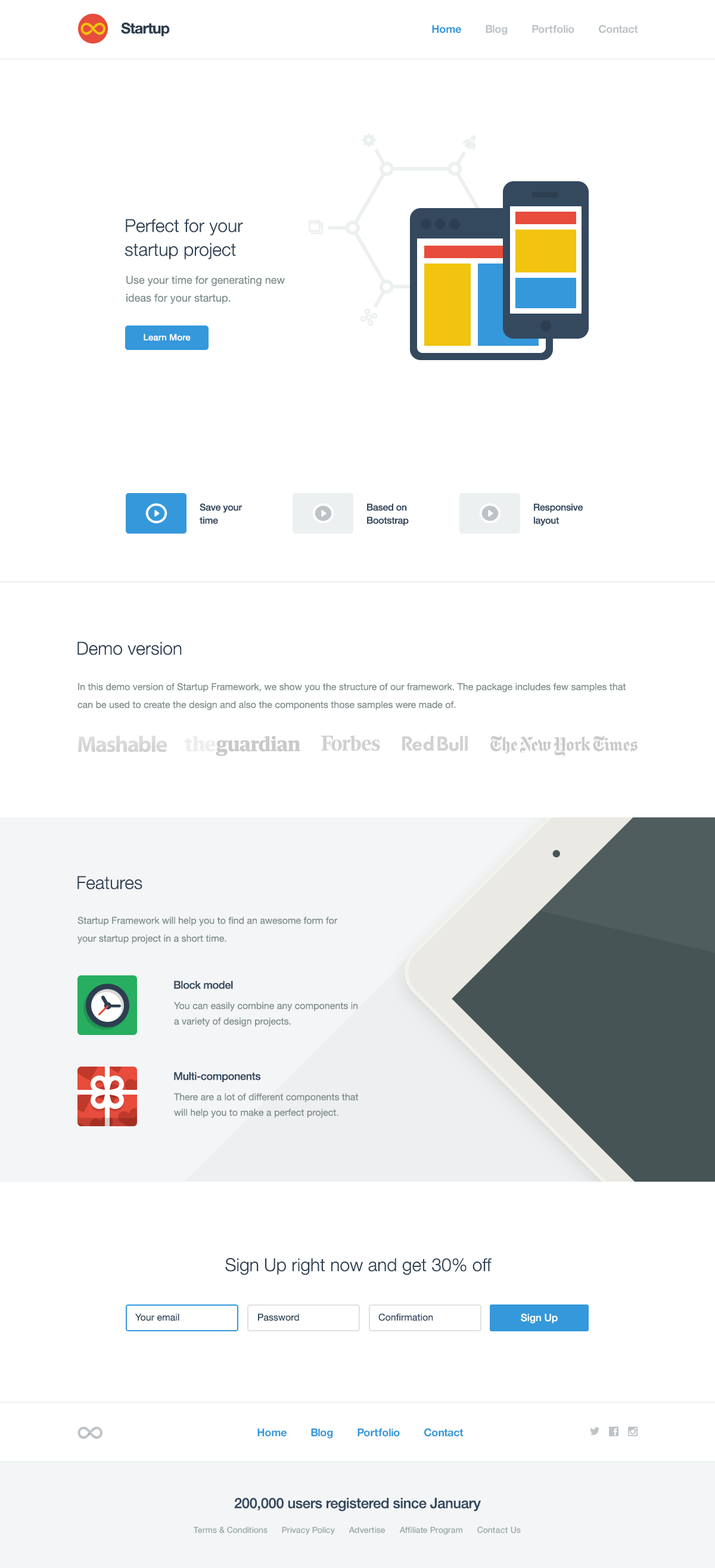
<style>
.page{position:relative;width:715px;height:1568px;background:#ffffff}
.page>*{position:absolute;margin:0}
.t1{font:14.9px "HelveticaNeue-Bold";letter-spacing:-0.04em;color:#2c3e50}
.t2{font:10.7px "HelveticaNeue-Bold";letter-spacing:-0.02em;color:#bdc3c7}
.t3{font:10.7px "HelveticaNeue-Bold";letter-spacing:-0.02em;color:#3498db}
.t4{font:17.9px/23.8px "HelveticaNeue-Light";color:#2c3e50}
.t5{font:10.7px/17.9px "HelveticaNeue";color:#7f8c8d}
.t6{font:8.9px "HelveticaNeue-Medium";color:#ffffff}
.t7{font:9.5px/13.1px "HelveticaNeue-Medium";letter-spacing:-0.02em;color:#34495e}
.t8{font:17.9px "HelveticaNeue-Light";color:#2c3e50}
.t9{font:9.5px/17.9px "HelveticaNeue";color:#7f8c8d}
.t10{font:10.7px "HelveticaNeue-Medium";letter-spacing:-0.02em;color:#34495e}
.t11{font:9.5px/15.5px "HelveticaNeue";color:#7f8c8d}
.t12{font:9.5px "HelveticaNeue";color:#34495e}
.t13{font:10.1px "HelveticaNeue-Medium";color:#ffffff}
.t14{font:14.3px "HelveticaNeue-Medium";letter-spacing:-0.02em;color:#34495e}
.t15{font:8.3px "HelveticaNeue-Medium";color:#95a5a6}
</style>
<div class="page">
<p class="t1" style="left:121px;top:22px;width:49px;height:14px">Startup</p>
<p class="t2" style="left:432px;top:24px;width:207px;height:11px"><span class="t3">Home</span>        Blog        Portfolio        Contact</p>
<p class="t4" style="left:125px;top:219px;width:118px;height:40px">Perfect for your <br>startup project</p>
<p class="t5" style="left:126px;top:275px;width:159px;height:29px">Use your time for generating new ideas for your startup.</p>
<p class="t6" style="left:144px;top:334px;width:47px;height:7px">Learn More</p>
<p class="t7" style="left:200px;top:503px;width:43px;height:21px">Save your <br>time</p>
<p class="t7" style="left:367px;top:503px;width:42px;height:23px">Based on <br>Bootstrap</p>
<p class="t7" style="left:534px;top:503px;width:49px;height:23px">Responsive <br>layout</p>
<p class="t8" style="left:78px;top:642px;width:104px;height:13px">Demo version</p>
<p class="t9" style="left:78px;top:683px;width:548px;height:27px">In this demo version of Startup Framework, we show you the structure of our framework. The package includes few samples that can be used to create the design and also the components those samples were made of.</p>
<p class="t8" style="left:78px;top:876px;width:64px;height:14px">Features</p>
<p class="t9" style="left:78px;top:916px;width:260px;height:28px">Startup Framework will help you to find an awesome form for your startup project in a short time.</p>
<p class="t10" style="left:174px;top:981px;width:59px;height:8px">Block model</p>
<p class="t11" style="left:174px;top:1002px;width:184px;height:25px">You can easily combine any components in a variety of design projects.</p>
<p class="t10" style="left:174px;top:1072px;width:87px;height:10px">Multi-components</p>
<p class="t11" style="left:174px;top:1093px;width:184px;height:25px">There are a lot of different components that will help you to make a perfect project.</p>
<p class="t8" style="left:225px;top:1258px;width:267px;height:17px">Sign Up right now and get 30% off</p>
<p class="t12" style="left:135px;top:1313px;width:44px;height:8px">Your email</p>
<p class="t12" style="left:258px;top:1313px;width:41px;height:8px">Password</p>
<p class="t12" style="left:379px;top:1313px;width:54px;height:8px">Confirmation</p>
<p class="t13" style="left:521px;top:1313px;width:37px;height:11px">Sign Up</p>
<p class="t3" style="left:258px;top:1428px;width:206px;height:11px">Home        Blog        Portfolio        Contact</p>
<p class="t14" style="left:234px;top:1498px;width:247px;height:13px">200,000 users registered since January</p>
<p class="t15" style="left:193px;top:1526px;width:328px;height:9px">Terms &amp; Conditions      Privacy Policy      Advertise      Affiliate Program      Contact Us</p>
</div>
